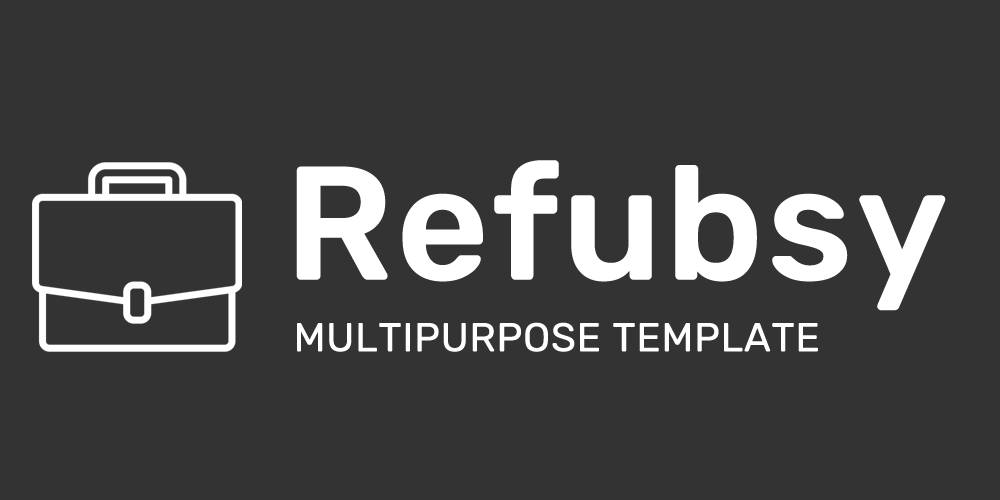
<style>
.page{position:relative;width:1000px;height:500px;background:#333333}
.page>*{position:absolute;margin:0}
.t1{font:160px "Rubik-Medium";letter-spacing:-0.005em;color:#ffffff;font-weight:bold}
.t2{font:40px "Rubik-Regular";letter-spacing:-0.005em;color:#ffffff;font-weight:bold}
</style>
<div class="page">
<p class="t1" style="left:296px;top:160px;width:650px;height:151px">Refubsy</p>
<p class="t2" style="left:297px;top:322px;width:521px;height:30px">MULTIPURPOSE TEMPLATE</p>
</div>
